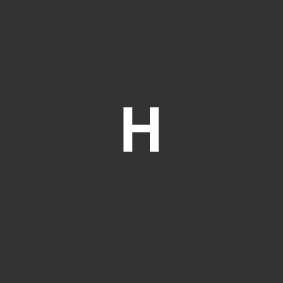
<style>
.page{position:relative;width:283px;height:283px;background:#333333}
.page>*{position:absolute;margin:0}
.t1{font:62px "Arial-BoldMT";color:#ffffff}
</style>
<div class="page">
<p class="t1" style="left:123px;top:107px;width:36px;height:45px">H</p>
</div>
